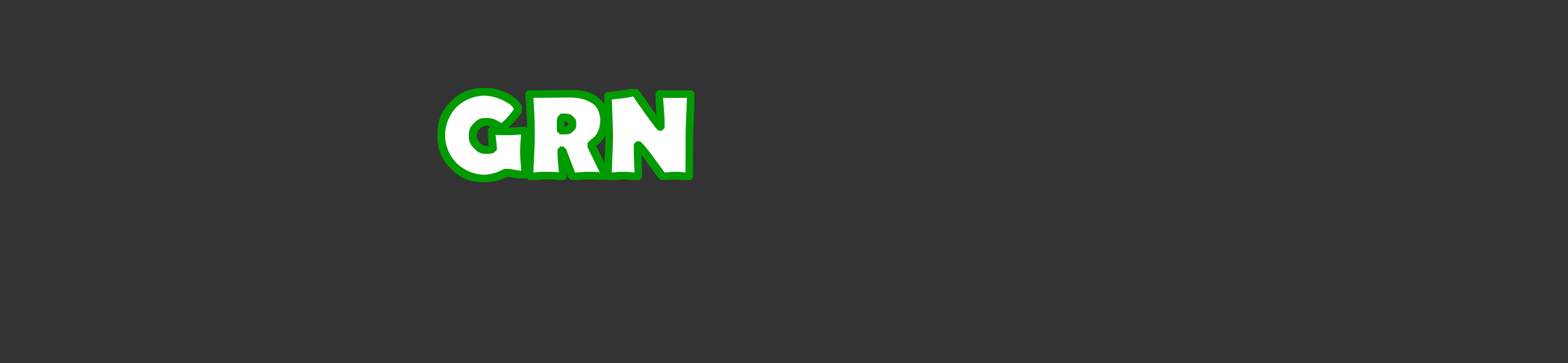
<style>
.page{position:relative;width:1568px;height:363px;background:#333333}
.page>*{position:absolute;margin:0}
.t1{font:119.5px "BerlinSansFB-Bold";letter-spacing:-0.025em;color:#ffffff}
</style>
<div class="page">
<p class="t1" style="left:441px;top:92px;width:250px;height:86px">GRN</p>
</div>
